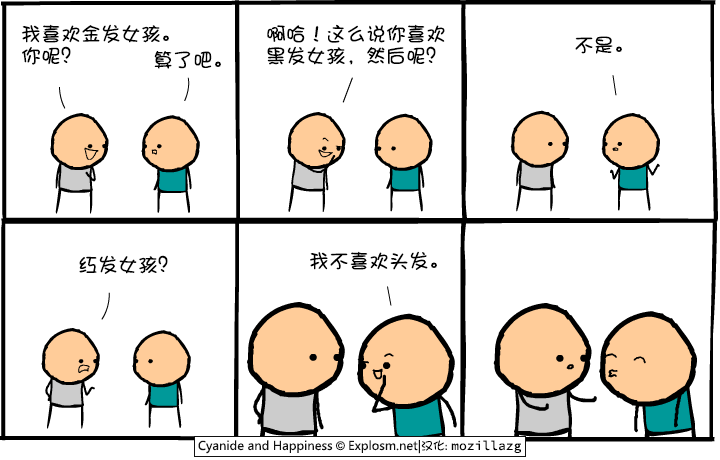
<style>
.page{position:relative;width:720px;height:460px;background:#ffffff}
.page>*{position:absolute;margin:0}
.t1{font:20px/22px "DFShaoNvW5";color:#000000}
.t2{font:20px "DFShaoNvW5";color:#000000}
</style>
<div class="page">
<p class="t1" style="left:21px;top:24px;width:148px;height:41px">我喜欢金发女孩。<br>你呢？</p>
<p class="t1" style="left:267px;top:24px;width:178px;height:41px">啊哈！这么说你喜欢<br>黑发女孩，然后呢？</p>
<p class="t2" style="left:575px;top:36px;width:47px;height:18px">不是。</p>
<p class="t2" style="left:154px;top:51px;width:67px;height:18px">算了吧。</p>
<p class="t2" style="left:79px;top:255px;width:89px;height:19px">红发女孩？</p>
<p class="t2" style="left:310px;top:251px;width:127px;height:19px">我不喜欢头发。</p>
</div>
